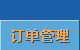
<style>
.page{position:relative;width:80px;height:50px;background:#5aa8da}
.page>*{position:absolute;margin:0}
.t1{font:14px "SimSun";color:#ffa34f;font-weight:bold}
</style>
<div class="page">
<p class="t1" style="left:10px;top:29px;width:59px;height:13px">订单管理</p>
</div>
